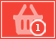
<style>
.page{position:relative;width:56px;height:39px;background:#f44336}
.page>*{position:absolute;margin:0}
.t1{font:8.8px "TimesNewRomanPS-BoldMT";color:#ffffff}
</style>
<div class="page">
<p class="t1" style="left:36px;top:24px;width:4px;height:7px">1</p>
</div>
